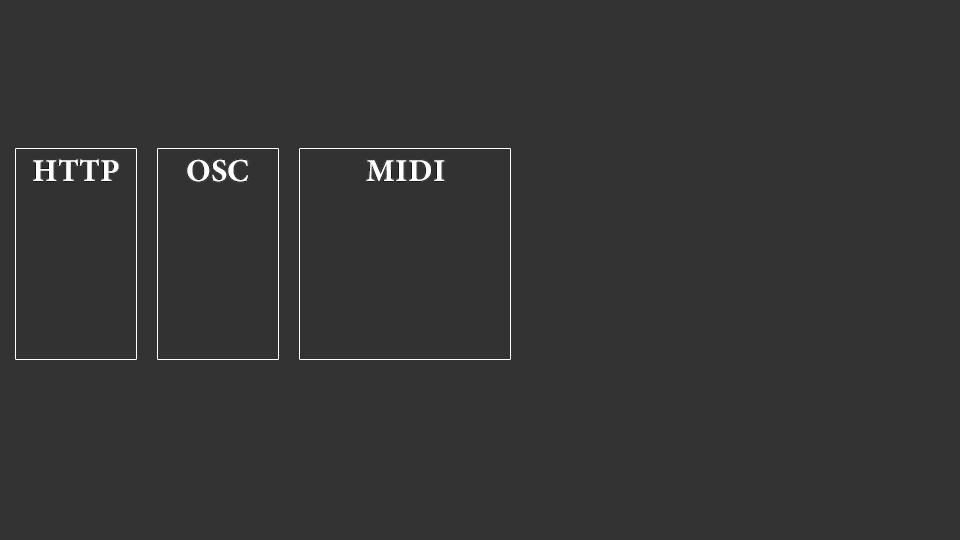
<style>
.page{position:relative;width:960px;height:540px;background:#333333}
.page>*{position:absolute;margin:0}
.t1{font:32px "MinionConceptRoman-Bold";color:#ffffff}
</style>
<div class="page">
<p class="t1" style="left:33px;top:159px;width:86px;height:22px">HTTP</p>
<p class="t1" style="left:187px;top:159px;width:62px;height:23px">OSC</p>
<p class="t1" style="left:366px;top:160px;width:79px;height:21px">MIDI</p>
</div>
